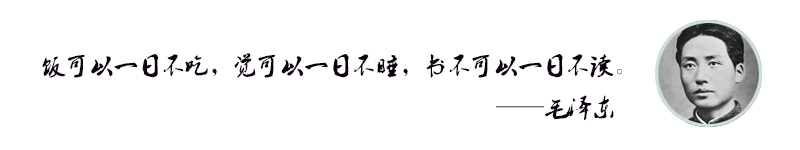
<style>
.page{position:relative;width:800px;height:150px;background:#ffffff}
.page>*{position:absolute;margin:0}
.t1{font:24px "2.0-";color:#0d0011}
</style>
<div class="page">
<p class="t1" style="left:42px;top:53px;width:580px;height:68px">饭可以一日不吃，觉可以一日不睡，书不可以一日不读。<br>                                                         ——毛泽东</p>
</div>
